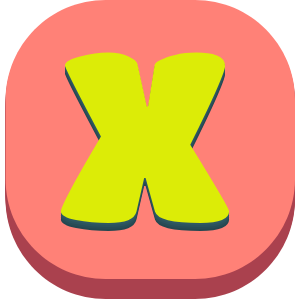
<style>
.page{position:relative;width:300px;height:300px;background:#ff8177}
.page>*{position:absolute;margin:0}
.t1{font:240px "TitanOne";color:#dcec07}
</style>
<div class="page">
<p class="t1" style="left:60px;top:52px;width:170px;height:171px">X</p>
</div>
